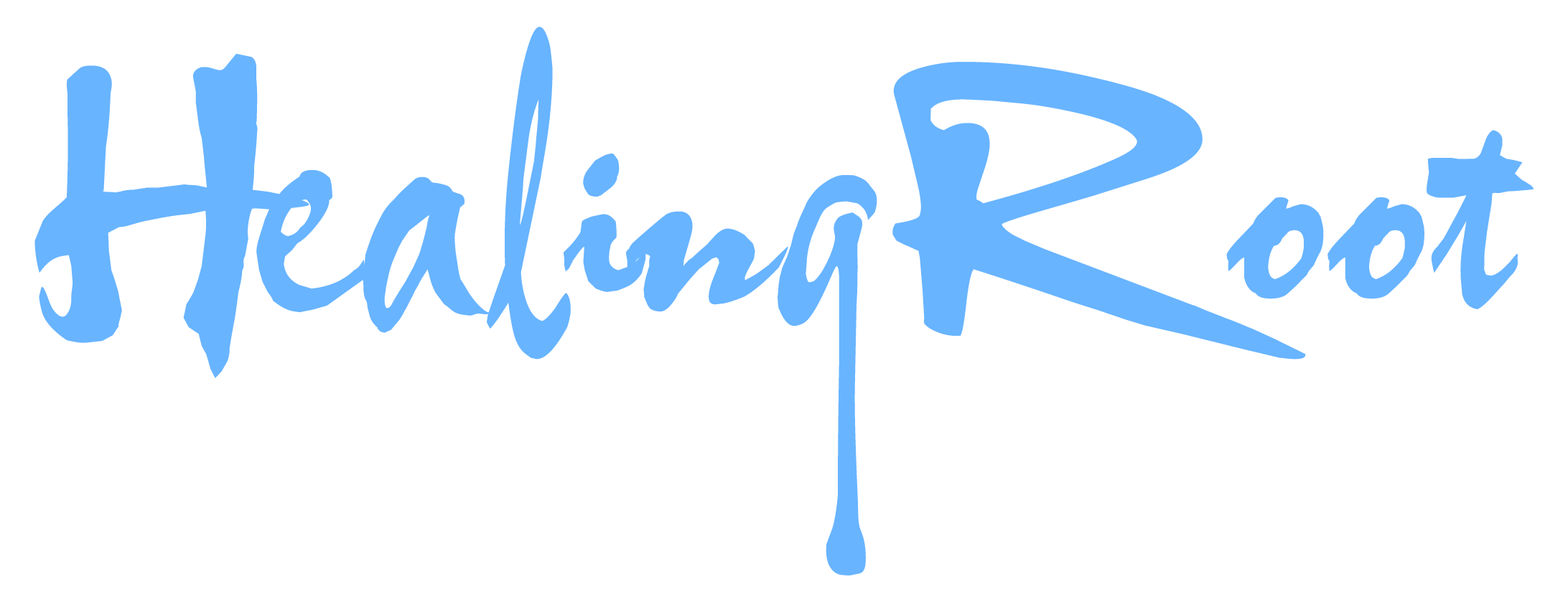
<style>
.page{position:relative;width:1568px;height:607px;background:#ffffff}
.page>*{position:absolute;margin:0}
.t1{font:287.2px/157.9px "VNI-Thufap2-Normal";color:#68b4ff;scale:0.94 1}
</style>
<div class="page">
<p class="t1" style="left:34px;top:27px;width:1500px;height:549px;text-align:center">Healing Root</p>
</div>
